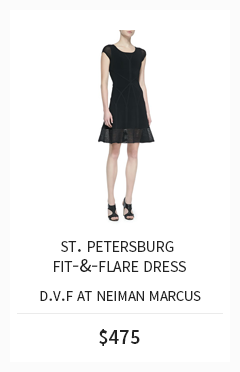
<style>
.page{position:relative;width:240px;height:372px;background:#ffffff}
.page>*{position:absolute;margin:0}
.t1{font:22.2px/20.8px "SourceSansPro-Regular";color:#232323;font-variant:small-caps}
.t2{font:19.4px/20.8px "SourceSansPro-Regular";color:#232323;font-variant:small-caps}
.t3{font:20.8px "SourceSansPro-Regular";color:#232323;font-variant:small-caps}
.t4{font:20.6px "SourceSansPro-Semibold";color:#232323}
</style>
<div class="page">
<p class="t1" style="left:54px;top:241px;width:132px;height:31px;text-align:center">st. petersburg <br>fit-<span class="t2">&amp;</span>-flare dress</p>
<p class="t3" style="left:40px;top:291px;width:161px;height:10px">d.v.f at neiman marcus</p>
<p class="t4" style="left:99px;top:329px;width:41px;height:17px">$475</p>
</div>
